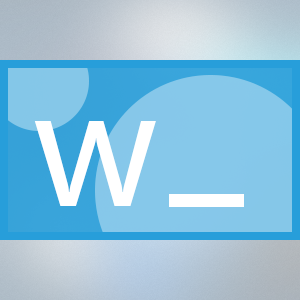
<style>
.page{position:relative;width:300px;height:300px}
.page>*{position:absolute;margin:0}
.t1{font:158.3px "MicrosoftYaHei";color:#ffffff}
</style>
<div class="page">
<p class="t1" style="left:34px;top:121px;width:122px;height:85px">w</p>
<p class="t1" style="left:34px;top:121px;width:122px;height:85px">w</p>
</div>
